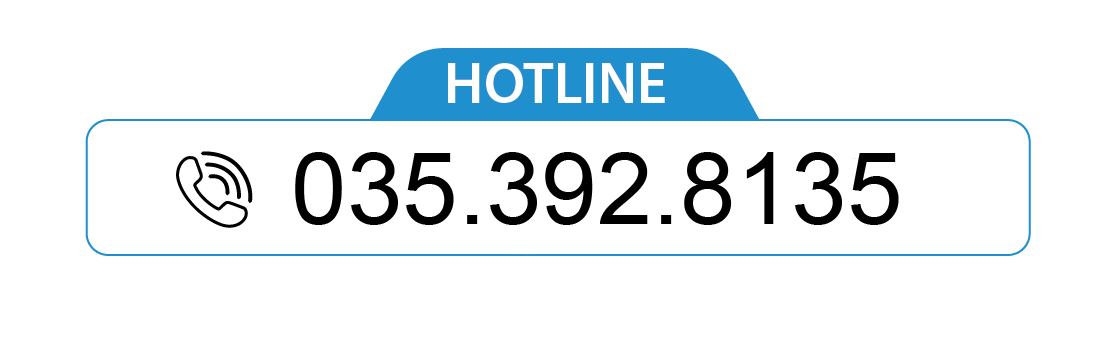
<style>
.page{position:relative;width:1110px;height:338px;background:#ffffff}
.page>*{position:absolute;margin:0}
.t1{font:100px "ArialMT";color:#000000}
</style>
<div class="page">
<p class="t1" style="left:295px;top:152px;width:604px;height:73px">035.392.8135</p>
</div>
